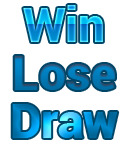
<style>
.page{position:relative;width:128px;height:144px;background:#ffffff}
.page>*{position:absolute;margin:0}
.t1{font:48px "Roboto-Black"}
</style>
<div class="page">
<p class="t1" style="left:23px;top:5px;width:80px;height:37px">Win</p>
<p class="t1" style="left:14px;top:56px;width:101px;height:34px">Lose</p>
<p class="t1" style="left:12px;top:104px;width:106px;height:34px">Draw</p>
</div>
